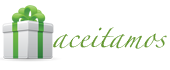
<style>
.page{position:relative;width:170px;height:70px;background:#ffffff}
.page>*{position:absolute;margin:0}
.t1{font:21px "Zapfino";color:#669933}
</style>
<div class="page">
<p class="t1" style="left:53px;top:27px;width:114px;height:22px">aceitamos</p>
</div>
